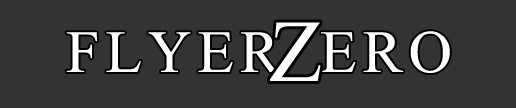
<style>
.page{position:relative;width:516px;height:108px;background:#333333}
.page>*{position:absolute;margin:0}
.t1{font:88px "TimesNewRomanPSMT";letter-spacing:0.1em;color:#ffffff}
.t2{font:60px "TimesNewRomanPSMT";letter-spacing:0.1em;color:#ffffff}
</style>
<div class="page">
<p class="t1" style="left:270px;top:22px;width:51px;height:59px">Z</p>
<p class="t2" style="left:66px;top:32px;width:215px;height:40px">FLYER</p>
<p class="t2" style="left:321px;top:31px;width:129px;height:42px">ERO</p>
</div>
